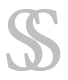
<style>
.page{position:relative;width:68px;height:80px;background:#ffffff}
.page>*{position:absolute;margin:0}
.t1{font:100px "AdobeDevanagari-Regular";color:#bfbfbf}
</style>
<div class="page">
<p class="t1" style="left:6px;top:9px;width:37px;height:62px">S</p>
<p class="t1" style="left:24px;top:9px;width:37px;height:62px">S</p>
</div>
